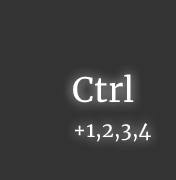
<style>
.page{position:relative;width:176px;height:180px;background:#333333}
.page>*{position:absolute;margin:0}
.t1{font:33.6px "Merriweather-Regular";color:#ffffff}
.t2{font:20px "Merriweather-Regular";color:#ffffff}
</style>
<div class="page">
<p class="t1" style="left:73px;top:74px;width:61px;height:29px">Ctrl</p>
<p class="t2" style="left:75px;top:123px;width:76px;height:19px">+1,2,3,4</p>
</div>
